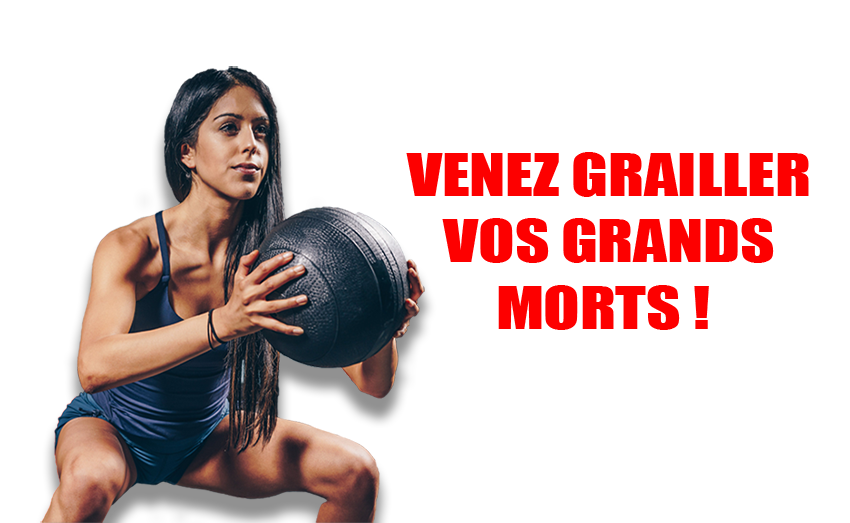
<style>
.page{position:relative;width:850px;height:523px;background:#ffffff}
.page>*{position:absolute;margin:0}
.t1{font:55.4px "Impact";color:#fd0000;scale:1.2 1}
</style>
<div class="page">
<p class="t1" style="left:406px;top:152px;width:403px;height:178px;text-align:center">VENEZ GRAILLER<br> VOS GRANDS <br>MORTS !</p>
</div>
